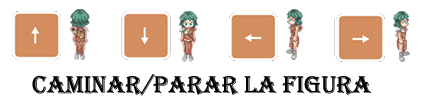
<style>
.page{position:relative;width:427px;height:100px;background:#ffffff}
.page>*{position:absolute;margin:0}
.t1{font:25px "Algerian";color:#000000}
</style>
<div class="page">
<p class="t1" style="left:32px;top:74px;width:340px;height:22px">caminar/parar la figura</p>
</div>
